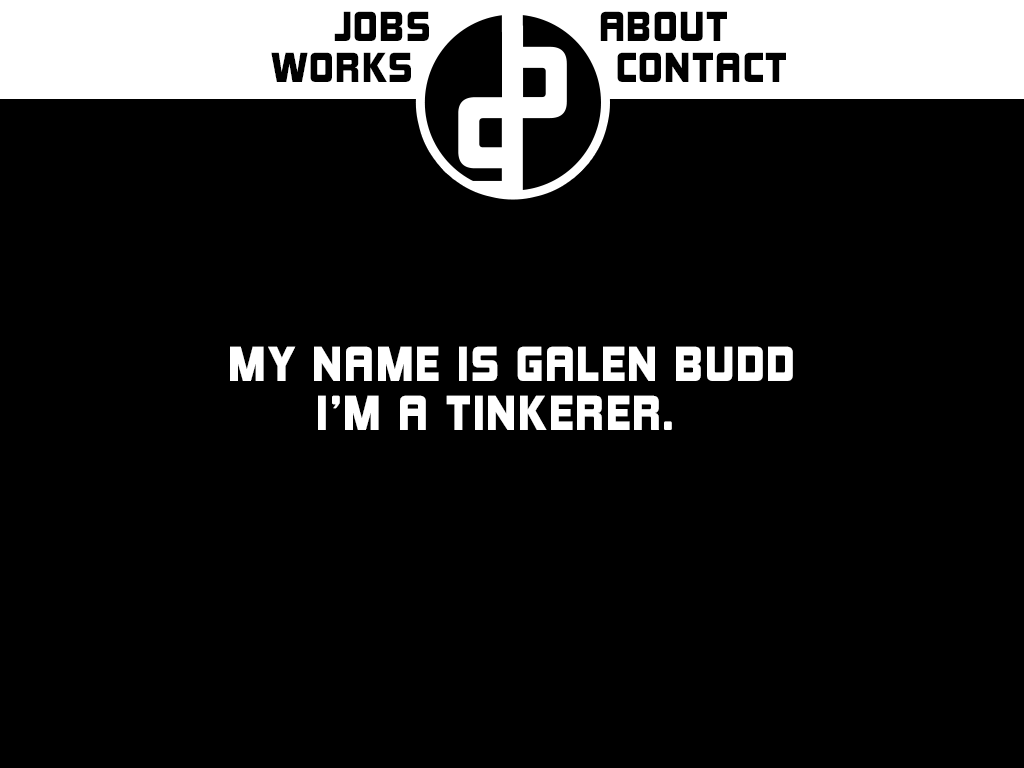
<style>
.page{position:relative;width:1024px;height:768px;background:#000000}
.page>*{position:absolute;margin:0}
.t1{font:38.6px "KimberleyBl-Regular";letter-spacing:0.04em;color:#000000}
.t2{font:45px "KimberleyBl-Regular";letter-spacing:0.04em;color:#ffffff}
</style>
<div class="page">
<p class="t1" style="left:334px;top:11px;width:95px;height:30px">JOBS</p>
<p class="t1" style="left:600px;top:11px;width:127px;height:30px">ABOUT</p>
<p class="t1" style="left:271px;top:52px;width:140px;height:30px">WORKS</p>
<p class="t1" style="left:617px;top:52px;width:169px;height:30px">CONTACT</p>
<p class="t2" style="left:230px;top:346px;width:563px;height:35px">MY NAME IS GALEN BUDD</p>
<p class="t2" style="left:318px;top:395px;width:108px;height:35px">I’M A</p>
<p class="t2" style="left:446px;top:395px;width:226px;height:35px">TINKERER.</p>
</div>
